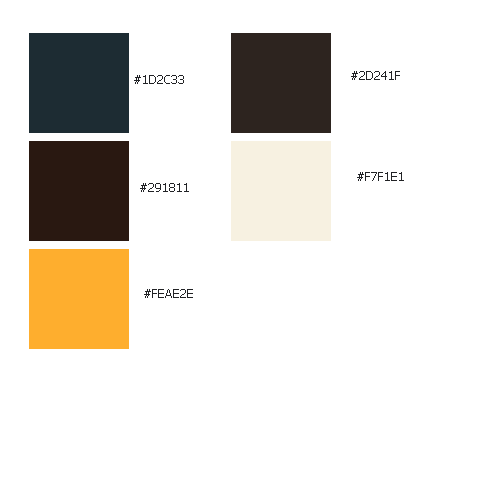
<style>
.page{position:relative;width:500px;height:500px;background:#ffffff}
.page>*{position:absolute;margin:0}
.t1{font:12px "Tahoma";color:#212225}
</style>
<div class="page">
<p class="t1" style="left:134px;top:75px;width:50px;height:9px">#1D2C33</p>
<p class="t1" style="left:351px;top:71px;width:49px;height:9px">#2D241F</p>
<p class="t1" style="left:357px;top:172px;width:47px;height:9px">#F7F1E1</p>
<p class="t1" style="left:140px;top:183px;width:49px;height:9px">#291811</p>
<p class="t1" style="left:144px;top:289px;width:49px;height:9px">#FEAE2E</p>
</div>
